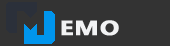
<style>
.page{position:relative;width:170px;height:46px;background:#333333}
.page>*{position:absolute;margin:0}
.t1{font:20.6px "KhmerUI-Bold";color:#f2f3f4;text-transform:uppercase;font-weight:bold;scale:1.23 1}
</style>
<div class="page">
<p class="t1" style="left:61px;top:20px;width:58px;height:16px">EMO</p>
</div>
